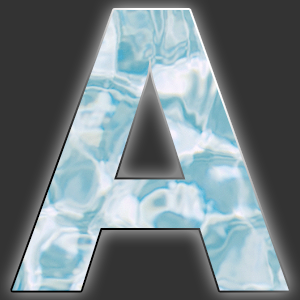
<style>
.page{position:relative;width:300px;height:300px;background:#333333}
.page>*{position:absolute;margin:0}
.t1{font:400px "Gadugi-Bold"}
</style>
<div class="page">
<p class="t1" style="left:12px;top:10px;width:277px;height:281px">A</p>
</div>
